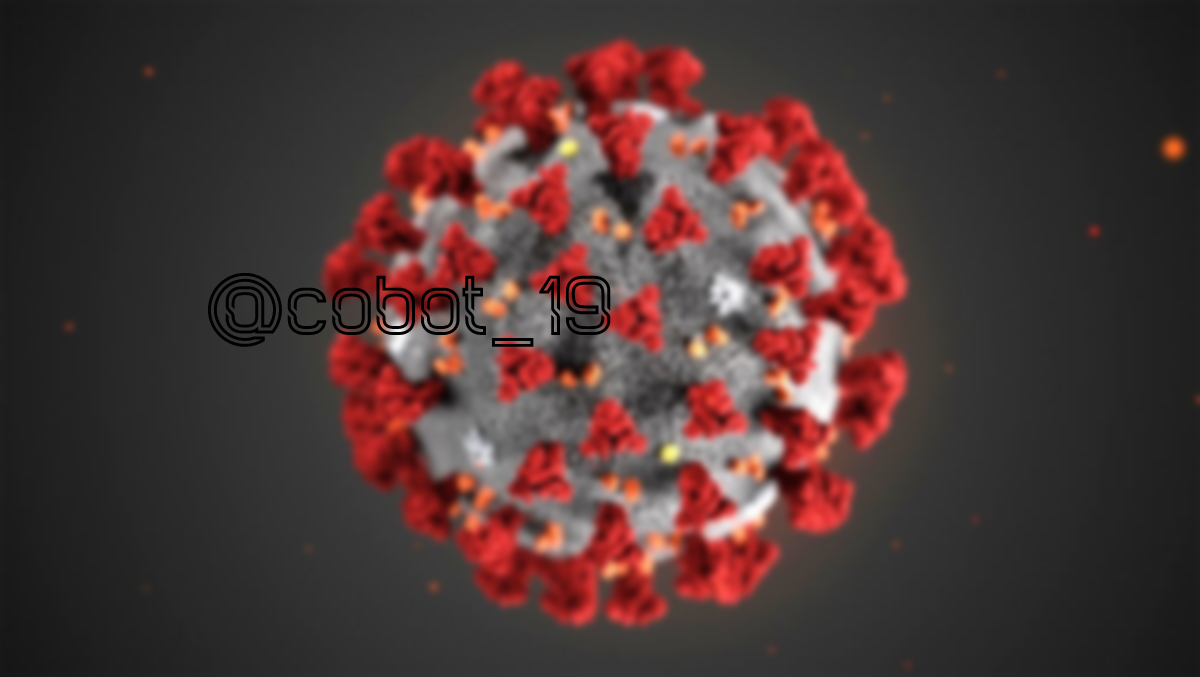
<style>
.page{position:relative;width:1200px;height:677px}
.page>*{position:absolute;margin:0}
.t1{font:71px "Sportrop-Regular";color:#000000}
</style>
<div class="page">
<p class="t1" style="left:207px;top:272px;width:404px;height:75px">@cobot_19</p>
</div>
